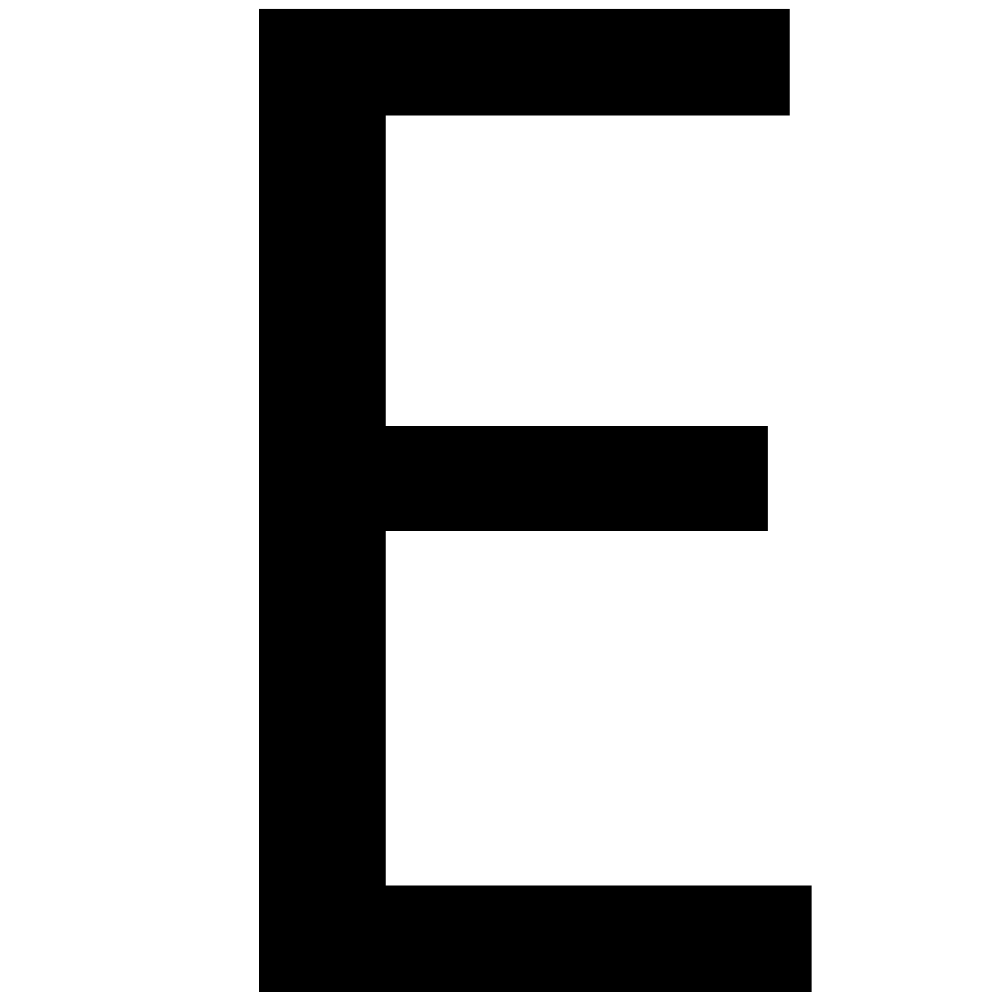
<style>
.page{position:relative;width:1000px;height:1000px;background:#ffffff}
.page>*{position:absolute;margin:0}
.t1{font:1458.3px "MyriadPro-Regular";color:#000000}
</style>
<div class="page">
<p class="t1" style="left:259px;top:8px;width:553px;height:984px">E</p>
</div>
